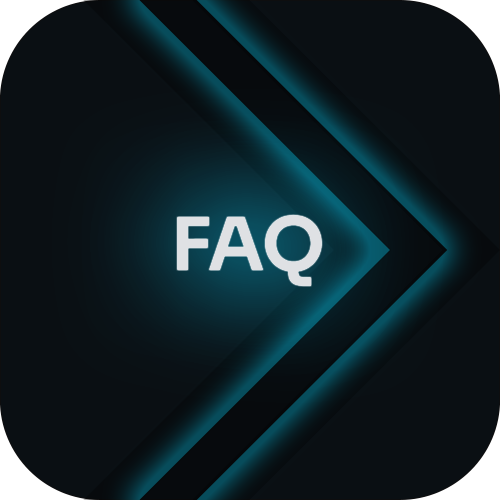
<style>
.page{position:relative;width:500px;height:500px;background:#0a0f13}
.page>*{position:absolute;margin:0}
.t1{font:72.8px "Sora-SemiBold";color:#dfe1e4}
</style>
<div class="page">
<p class="t1" style="left:177px;top:215px;width:145px;height:71px">FAQ</p>
</div>
